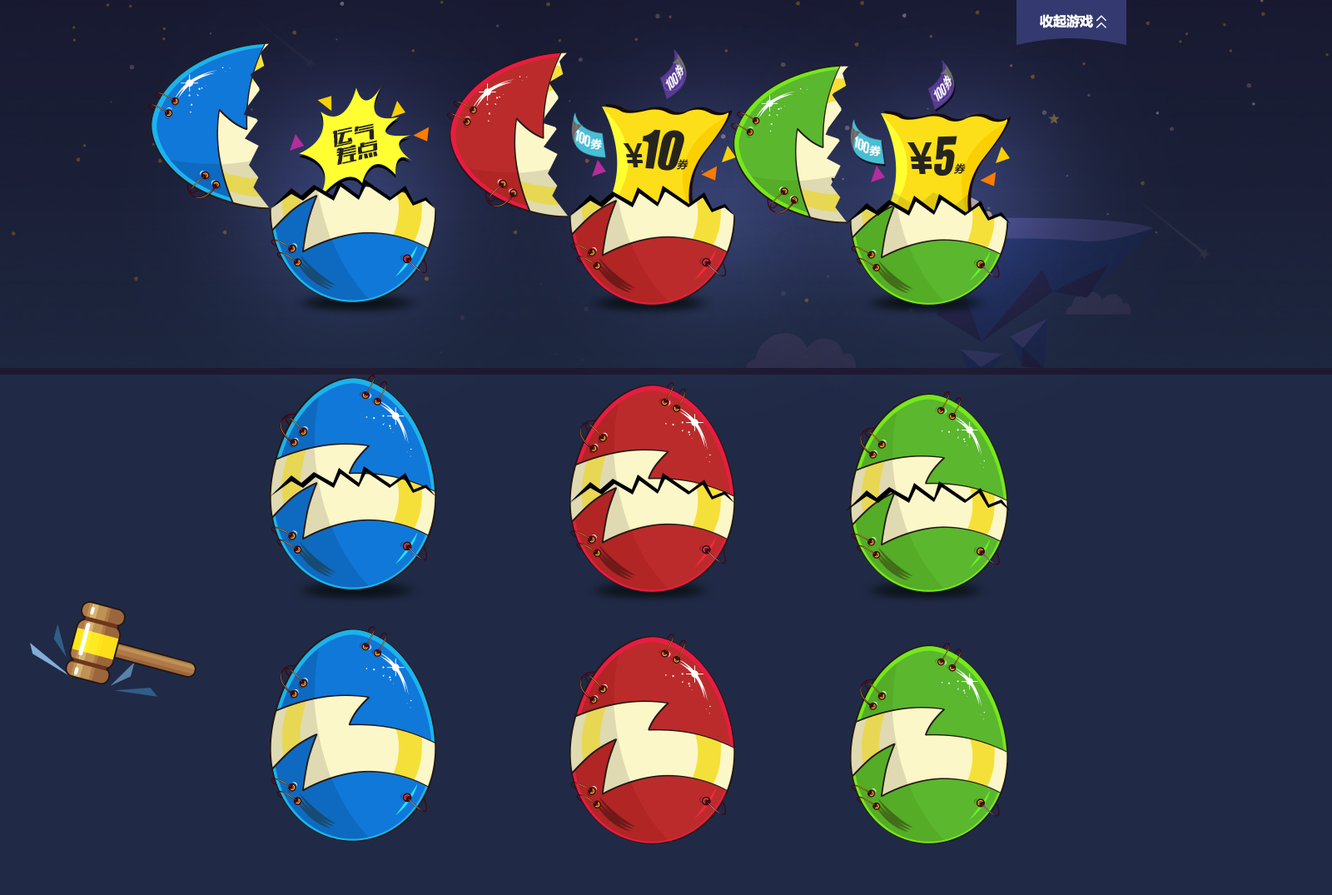
<style>
.page{position:relative;width:1332px;height:895px;background:#202a46}
.page>*{position:absolute;margin:0}
.t1{font:13.3px "MicrosoftYaHei-Bold";color:#ffffff}
.t2{font:13.3px "SimSun";color:#ffffff;font-weight:bold}
.t3{font:21.7px/17.4px "FZCTHJW--GB1-0";color:#26241d;font-style:italic}
.t4{font:32.2px "MicrosoftYaHei-Bold";color:#26241d;scale:0.95 1}
.t5{font:40.9px "MicrosoftYaHei-Bold";color:#26241d}
.t6{font:11px "MicrosoftYaHei-Bold";color:#26241d}
</style>
<div class="page">
<p class="t1" style="left:1040px;top:14px;width:53px;height:14px">收起游戏</p>
<p class="t2" style="left:1097px;top:15px;width:10px;height:13px;rotate:-90deg">&gt;&gt;</p>
<p class="t3" style="left:332px;top:123px;width:46px;height:43px;text-align:center;rotate:-12deg">运气<br>差点</p>
<p class="t4" style="left:623px;top:143px;width:21px;height:24px">￥</p>
<p class="t5" style="left:908px;top:142px;width:25px;height:32px">￥</p>
<p class="t6" style="left:677px;top:159px;width:12px;height:11px">券</p>
<p class="t6" style="left:954px;top:163px;width:12px;height:11px">券</p>
</div>
